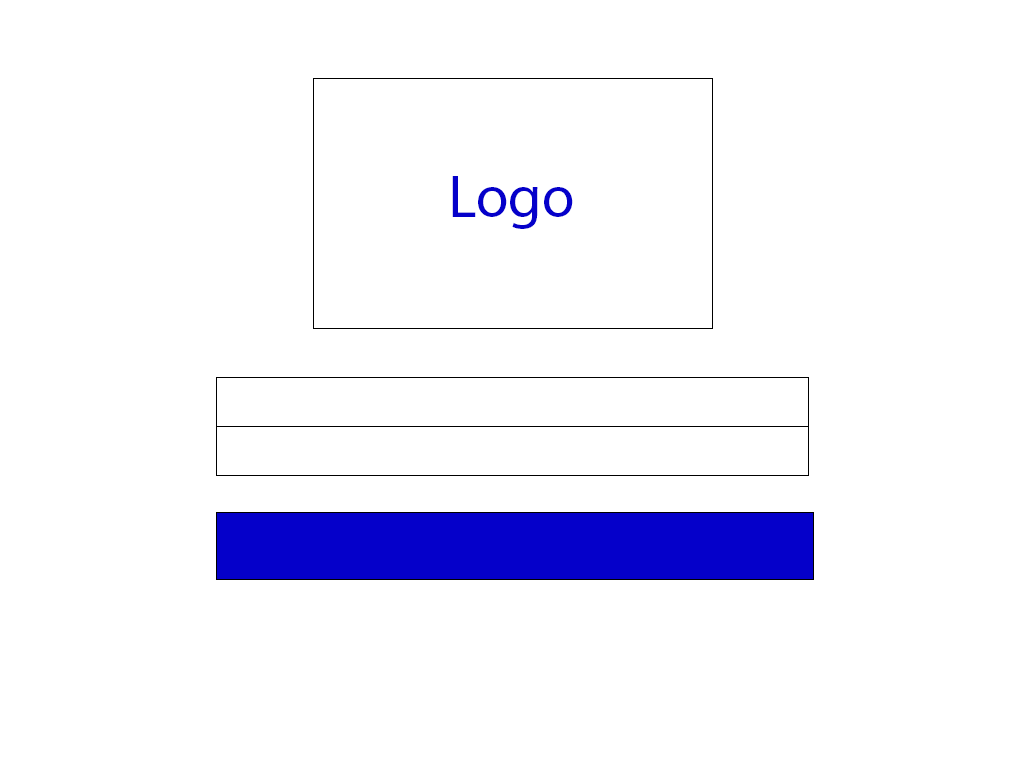
<style>
.page{position:relative;width:1024px;height:768px;background:#ffffff}
.page>*{position:absolute;margin:0}
.t1{font:60px "MyriadPro-Regular";color:#0500ca}
</style>
<div class="page">
<p class="t1" style="left:452px;top:176px;width:121px;height:53px">Logo</p>
</div>
